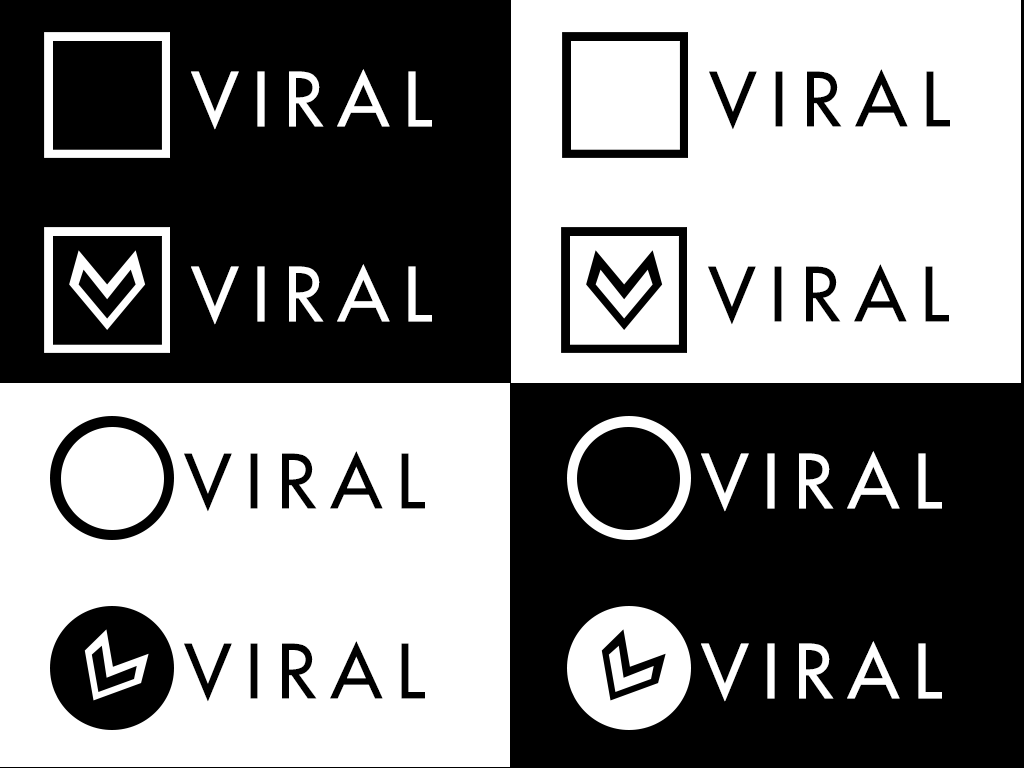
<style>
.page{position:relative;width:1024px;height:768px;background:#000000}
.page>*{position:absolute;margin:0}
.t1{font:72.5px "FuturaLT";letter-spacing:0.2em;color:#ffffff;text-transform:uppercase}
.t2{font:72.5px "FuturaLT";letter-spacing:0.2em;color:#000000;text-transform:uppercase}
</style>
<div class="page">
<p class="t1" style="left:191px;top:69px;width:241px;height:61px">viral</p>
<p class="t2" style="left:709px;top:69px;width:241px;height:61px">viral</p>
<p class="t1" style="left:191px;top:264px;width:241px;height:61px">viral</p>
<p class="t2" style="left:708px;top:264px;width:241px;height:61px">viral</p>
<p class="t2" style="left:184px;top:451px;width:241px;height:61px">viral</p>
<p class="t1" style="left:701px;top:451px;width:241px;height:61px">viral</p>
<p class="t2" style="left:184px;top:641px;width:241px;height:61px">viral</p>
<p class="t1" style="left:701px;top:641px;width:241px;height:61px">viral</p>
</div>
